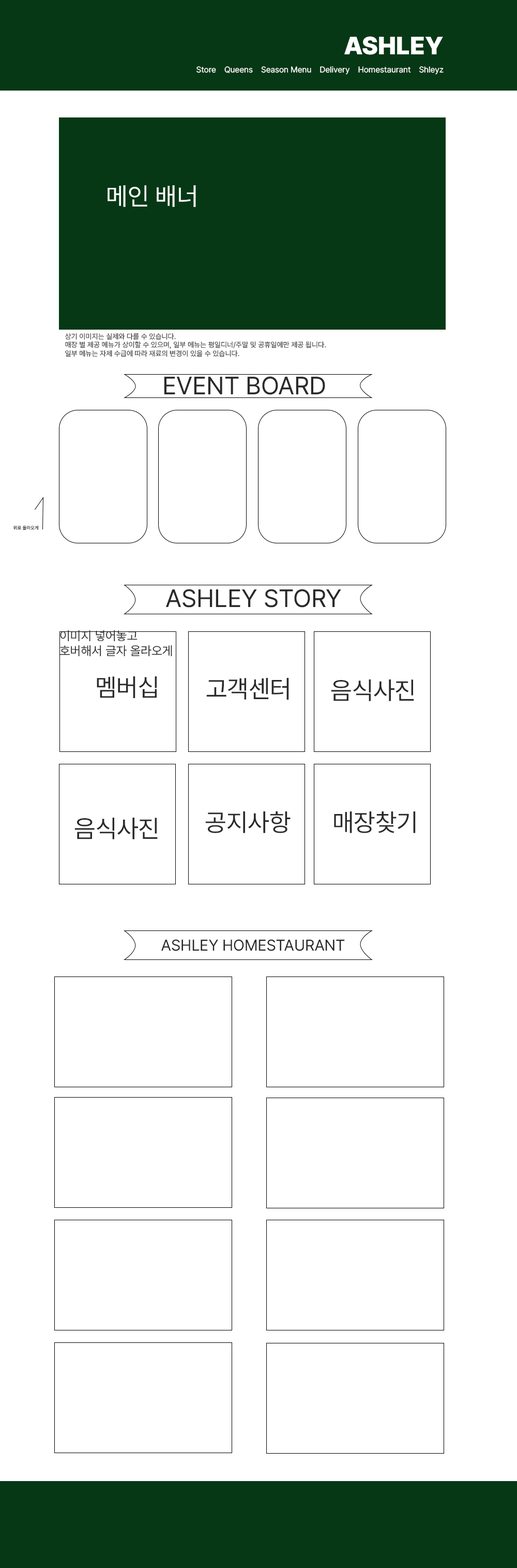
<style>
.page{position:relative;width:517px;height:1568px;background:#ffffff}
.page>*{position:absolute;margin:0}
.t1{font:24.8px "Pretendard-Black";color:#ffffff}
.t2{font:8.3px "Pretendard-Regular";color:#ffffff}
.t3{font:24.8px "Pretendard-Regular";color:#ffffff}
.t4{font:7.2px "Pretendard-Regular";color:#393838}
.t5{font:24.8px "Pretendard-Regular";color:#2a2a2a}
.t6{font:4.7px "Pretendard-Regular"}
.t7{font:12.4px "Pretendard-Regular";color:#2a2a2a}
.t8{font:15.5px "Pretendard-Regular";color:#2a2a2a}
</style>
<div class="page">
<p class="t1" style="left:345px;top:36px;width:98px;height:19px">ASHLEY</p>
<p class="t2" style="left:197px;top:66px;width:247px;height:9px">Store    Queens    Season Menu    Delivery    Homestaurant    Shleyz</p>
<p class="t3" style="left:108px;top:185px;width:88px;height:22px">메인 배너</p>
<p class="t4" style="left:65px;top:333px;width:262px;height:24px">상기 이미지는 실제와 다를 수 있습니다.<br>매장 별 제공 메뉴가 상이할 수 있으며, 일부 메뉴는 평일디너/주말 및 공휴일에만 제공 됩니다.<br>일부 메뉴는 자제 수급에 따라 재료의 변경이 있을 수 있습니다.</p>
<p class="t5" style="left:164px;top:376px;width:162px;height:19px">EVENT BOARD</p>
<p class="t6" style="left:13px;top:525px;width:25px;height:5px">위로 올라오게</p>
<p class="t5" style="left:166px;top:589px;width:176px;height:19px">ASHLEY STORY</p>
<p class="t7" style="left:60px;top:630px;width:112px;height:27px">이미지 넣어놓고 <br>호버해서 글자 올라오게</p>
<p class="t5" style="left:97px;top:676px;width:60px;height:22px">멤버십</p>
<p class="t5" style="left:206px;top:678px;width:83px;height:22px">고객센터</p>
<p class="t5" style="left:331px;top:679px;width:84px;height:22px">음식사진</p>
<p class="t5" style="left:75px;top:818px;width:83px;height:21px">음식사진</p>
<p class="t5" style="left:205px;top:811px;width:86px;height:22px">공지사항</p>
<p class="t5" style="left:334px;top:811px;width:82px;height:22px">매장찾기</p>
<p class="t8" style="left:161px;top:939px;width:184px;height:12px">ASHLEY HOMESTAURANT</p>
</div>
